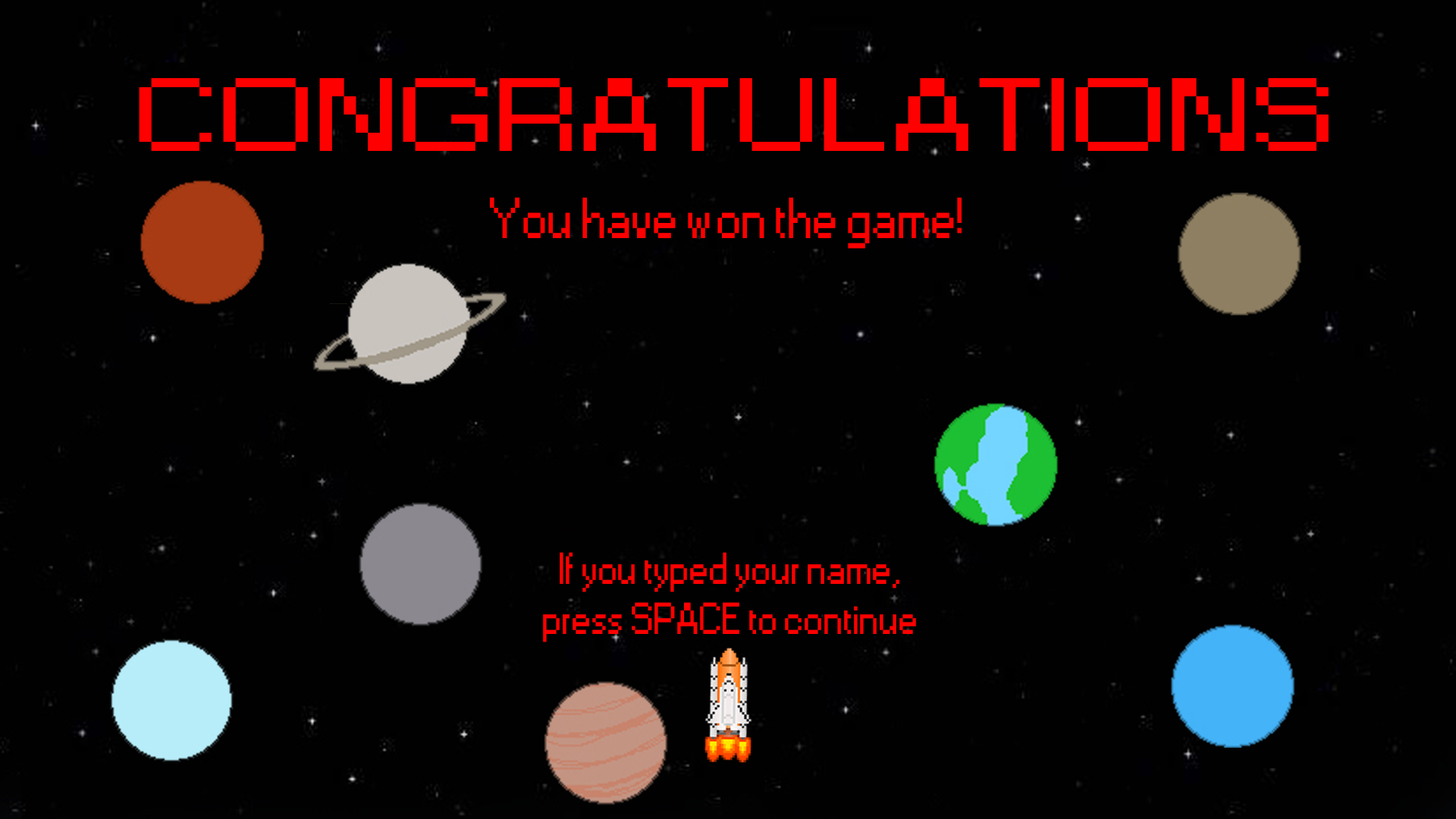
<style>
.page{position:relative;width:1456px;height:819px;background:#010101}
.page>*{position:absolute;margin:0}
.t1{font:97.1px "Small Fonts";color:#ff0000;scale:1.58 1}
.t2{font:53.9px "Small Fonts";color:#ff0000}
.t3{font:41.8px "Small Fonts";color:#ff0000}
</style>
<div class="page">
<p class="t1" style="left:139px;top:78px;width:1190px;height:73px">CONGRATULATIONS</p>
<p class="t2" style="left:490px;top:197px;width:472px;height:52px">You have won the game!</p>
<p class="t3" style="left:543px;top:552px;width:373px;height:90px;text-align:center">If you typed your name,<br>press SPACE to continue</p>
</div>
